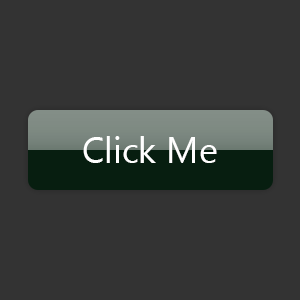
<style>
.page{position:relative;width:300px;height:300px;background:#333333}
.page>*{position:absolute;margin:0}
.t1{font:36px "SegoeUI";color:#ffffff}
</style>
<div class="page">
<p class="t1" style="left:83px;top:136px;width:134px;height:27px">Click Me</p>
</div>
